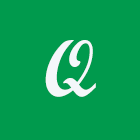
<style>
.page{position:relative;width:140px;height:140px;background:#009a4d}
.page>*{position:absolute;margin:0}
.t1{font:80px "ScriptMTBold";color:#f4f7fa}
</style>
<div class="page">
<p class="t1" style="left:45px;top:40px;width:51px;height:57px">Q</p>
</div>
